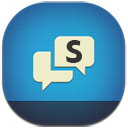
<style>
.page{position:relative;width:128px;height:128px}
.page>*{position:absolute;margin:0}
.t1{font:36px "Agenda-Bold";color:#333333}
</style>
<div class="page">
<p class="t1" style="left:66px;top:40px;width:16px;height:23px">S</p>
</div>
